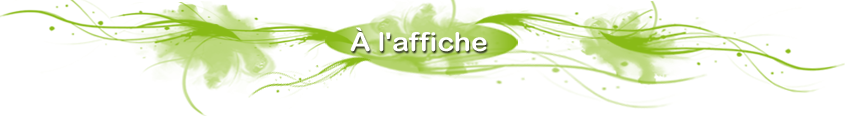
<style>
.page{position:relative;width:848px;height:116px;background:#ffffff}
.page>*{position:absolute;margin:0}
.t1{font:26px "ArialRoundedMTBold";color:#ffffff;scale:1.1 1}
</style>
<div class="page">
<p class="t1" style="left:350px;top:27px;width:137px;height:25px">À l'affiche</p>
</div>
